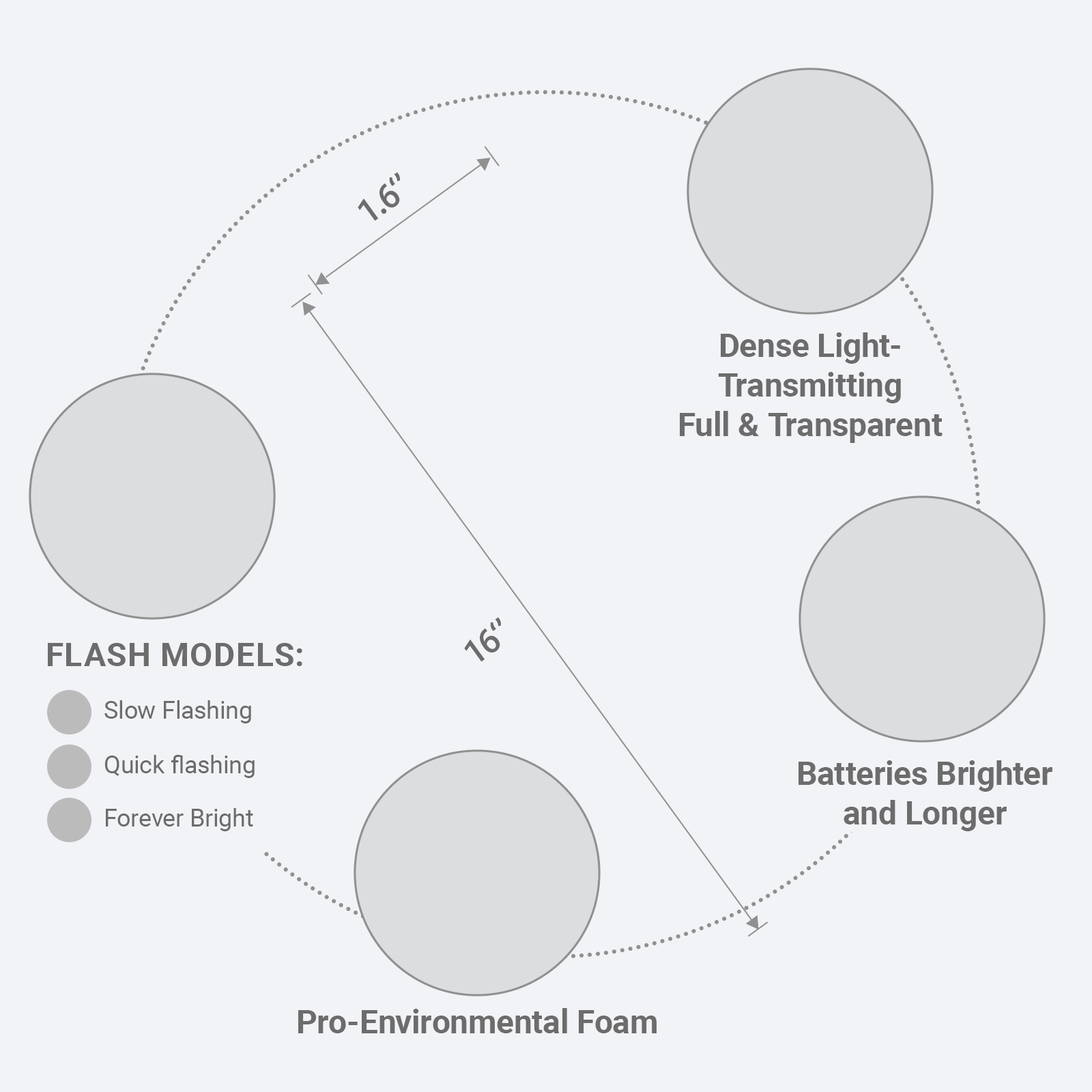
<style>
.page{position:relative;width:1092px;height:1092px;background:#f2f3f6}
.page>*{position:absolute;margin:0}
.t1{font:34.1px "Roboto-Medium";color:#6c6c6c}
.t2{font:34.1px "AdobeHeitiStd-Regular";color:#6c6c6c}
.t3{font:32.8px "Roboto-Bold";color:#6c6c6c}
.t4{font:32.8px "Roboto-Bold";color:#6c6c6c;text-transform:uppercase}
.t5{font:24.6px "Roboto-Regular";color:#6c6c6c}
</style>
<div class="page">
<p class="t1" style="left:358px;top:172px;width:42px;height:49px;rotate:-36deg">1<span class="t2">.</span>6‘’</p>
<p class="t3" style="left:680px;top:332px;width:263px;height:111px;text-align:center">Dense Light-<br>Transmitting<br>Full &amp; Transparent</p>
<p class="t1" style="left:464px;top:617px;width:37px;height:45px;rotate:-36deg">16‘’</p>
<p class="t4" style="left:48px;top:643px;width:254px;height:23px">Flash Models:</p>
<p class="t5" style="left:104px;top:700px;width:147px;height:23px">Slow Flashing</p>
<p class="t5" style="left:104px;top:755px;width:151px;height:23px">Quick flashing</p>
<p class="t3" style="left:799px;top:760px;width:253px;height:71px;text-align:center">Batteries Brighter<br>and Longer</p>
<p class="t5" style="left:106px;top:808px;width:147px;height:23px">Forever Bright</p>
<p class="t3" style="left:298px;top:1008px;width:359px;height:25px">Pro-Environmental Foam</p>
</div>
